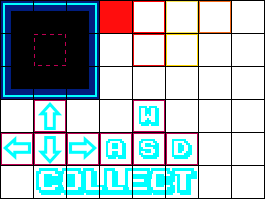
<style>
.page{position:relative;width:265px;height:199px;background:#ffffff}
.page>*{position:absolute;margin:0}
.t1{font:21px "KarmaticArcade";letter-spacing:-0.025em;color:#00ffff}
.t2{font:27.6px "KarmaticArcade";letter-spacing:-0.025em;color:#00ffff}
</style>
<div class="page">
<p class="t1" style="left:139px;top:106px;width:20px;height:20px">w</p>
<p class="t1" style="left:106px;top:139px;width:20px;height:20px">a</p>
<p class="t1" style="left:139px;top:139px;width:20px;height:20px">s</p>
<p class="t1" style="left:172px;top:139px;width:20px;height:20px">d</p>
<p class="t2" style="left:36px;top:168px;width:161px;height:27px">Collect</p>
</div>
